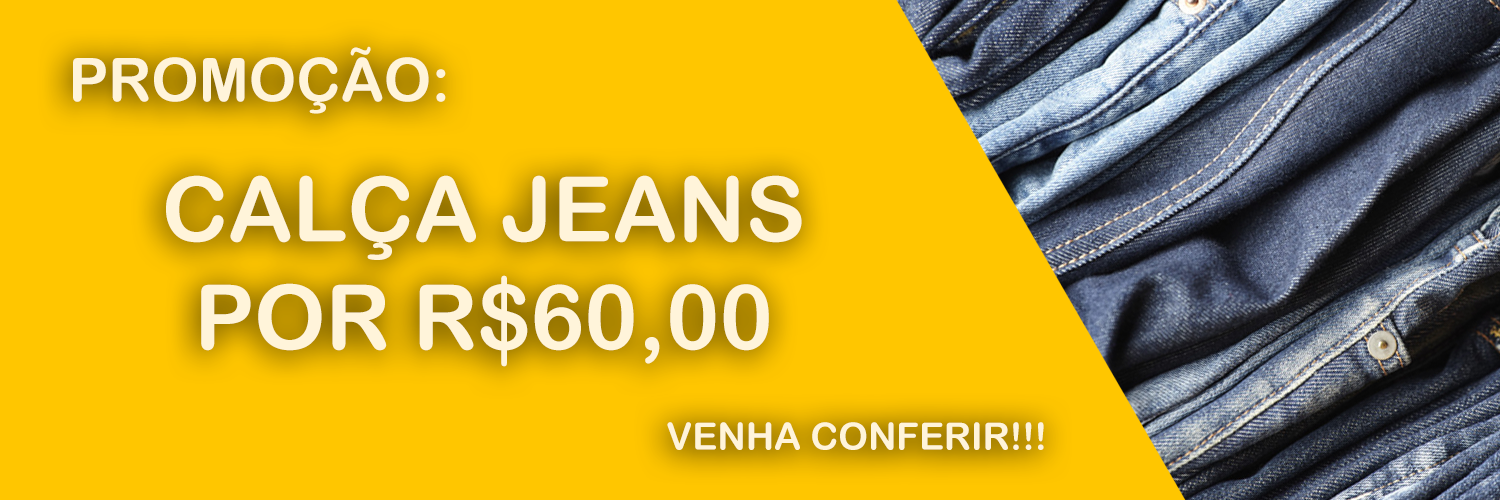
<style>
.page{position:relative;width:1500px;height:500px;background:#ffc600}
.page>*{position:absolute;margin:0}
.t1{font:60px "ArialRoundedMTBold";color:#fff4da}
.t2{font:90px "ArialRoundedMTBold";color:#fff4da}
.t3{font:37.5px "ArialRoundedMTBold";color:#fff4da}
</style>
<div class="page">
<p class="t1" style="left:73px;top:46px;width:373px;height:68px">PROMOÇÃO:</p>
<p class="t2" style="left:166px;top:175px;width:636px;height:192px;text-align:center">CALÇA JEANS<br>POR R$60,00</p>
<p class="t3" style="left:667px;top:422px;width:377px;height:28px">VENHA CONFERIR!!!</p>
</div>
